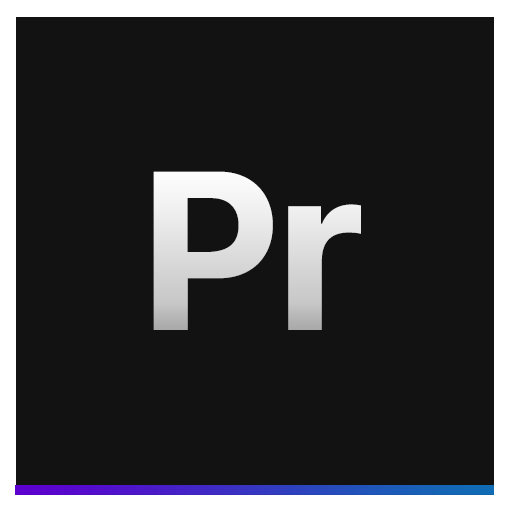
<style>
.page{position:relative;width:512px;height:512px;background:#121212}
.page>*{position:absolute;margin:0}
.t1{font:237.6px "SanFranciscoDisplay-Bold"}
</style>
<div class="page">
<p class="t1" style="left:153px;top:171px;width:208px;height:159px">Pr</p>
</div>
